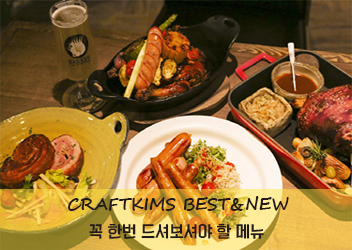
<style>
.page{position:relative;width:352px;height:250px}
.page>*{position:absolute;margin:0}
.t1{font:16.7px "SegoeScript-Bold";color:#22191b}
.t2{font:15px "KoreanYNSJG4-R";color:#22191b}
</style>
<div class="page">
<p class="t1" style="left:67px;top:196px;width:222px;height:15px">CRAFTKIMS BEST&amp;NEW</p>
<p class="t2" style="left:89px;top:223px;width:175px;height:16px">꼭 한번 드셔보셔야 할 메뉴</p>
</div>
